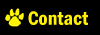
<style>
.page{position:relative;width:100px;height:35px;background:#000000}
.page>*{position:absolute;margin:0}
.t1{font:20px "FranklinGotT-DemCon";color:#fff100}
</style>
<div class="page">
<p class="t1" style="left:28px;top:11px;width:60px;height:14px">Contact</p>
</div>
